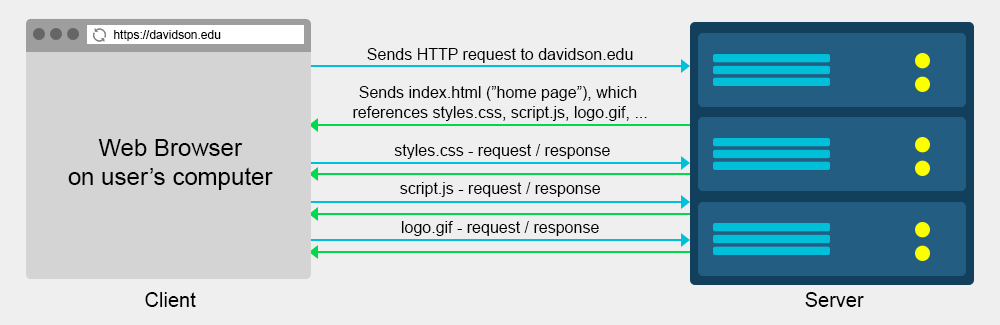
<style>
.page{position:relative;width:1000px;height:325px;background:#efefef}
.page>*{position:absolute;margin:0}
.t1{font:12px "ArialMT";color:#000000}
.t2{font:16px "ArialMT";color:#000000}
.t3{font:24px "ArialMT";color:#000000}
.t4{font:20px "ArialMT";color:#000000}
</style>
<div class="page">
<p class="t1" style="left:114px;top:30px;width:107px;height:11px">https://davidson.edu</p>
<p class="t2" style="left:353px;top:48px;width:294px;height:188px;text-align:center">Sends HTTP request to davidson.edu<br><br>Sends index.html (”home page”), which <br>references styles.css, script.js, logo.gif, ...<br><br> styles.css - request / response<br><br>script.js - request / response<br><br>logo.gif - request / response</p>
<p class="t3" style="left:68px;top:139px;width:205px;height:51px;text-align:center">Web Browser<br>on user’s computer</p>
<p class="t4" style="left:145px;top:292px;width:51px;height:15px">Client</p>
<p class="t4" style="left:805px;top:292px;width:59px;height:15px">Server</p>
</div>
